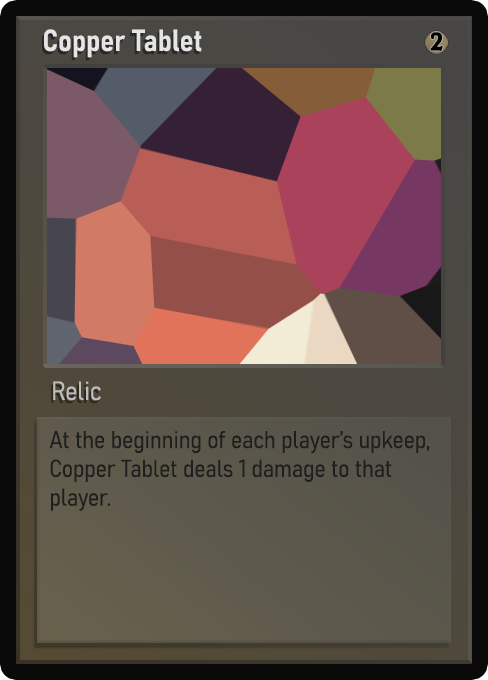
<style>
.page{position:relative;width:488px;height:680px}
.page>*{position:absolute;margin:0}
.t1{font:30px "Bahnschrift-SemiBoldSemiCondensed";color:#f2f2f2;font-weight:bold}
.t2{font:25px "WTRRoycroft";color:#000000;font-weight:bold;scale:1.09 1}
.t3{font:26px "Bahnschrift-LightSemiCondensed";color:#c8c8c8;font-weight:bold}
.t4{font:24px "Bahnschrift-LightSemiCondensed";color:#1e1e1e;font-weight:bold}
</style>
<div class="page">
<p class="t1" style="left:44px;top:29px;width:158px;height:29px;opacity:0.9">Copper Tablet</p>
<p class="t2" style="left:430px;top:32px;width:13px;height:19px">2</p>
<p class="t3" style="left:53px;top:381px;width:48px;height:20px;opacity:0.9">Relic</p>
<p class="t4" style="left:49px;top:431px;width:381px;height:80px">At the beginning of each player’s upkeep, Copper Tablet deals 1 damage to that player.</p>
</div>
